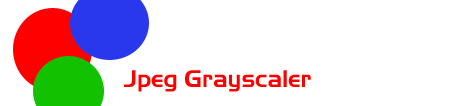
<style>
.page{position:relative;width:453px;height:106px;background:#ffffff}
.page>*{position:absolute;margin:0}
.t1{font:24px "Slicker";color:#ff0000}
</style>
<div class="page">
<p class="t1" style="left:124px;top:70px;width:187px;height:22px">Jpeg Grayscaler</p>
</div>
